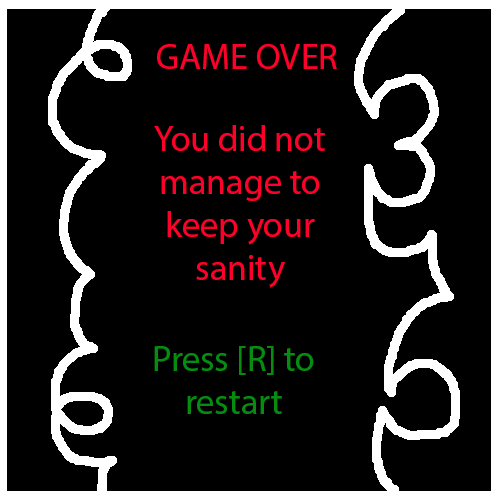
<style>
.page{position:relative;width:500px;height:500px;background:#000000}
.page>*{position:absolute;margin:0}
.t1{font:36px "MyriadPro-Regular";color:#ff002a}
.t2{font:36px "MyriadPro-Regular";color:#078c12}
</style>
<div class="page">
<p class="t1" style="left:157px;top:44px;width:180px;height:25px">GAME OVER</p>
<p class="t1" style="left:154px;top:125px;width:171px;height:163px;text-align:center">You did not manage to keep your sanity</p>
<p class="t2" style="left:154px;top:346px;width:160px;height:68px;text-align:center">Press [R] to restart</p>
</div>
